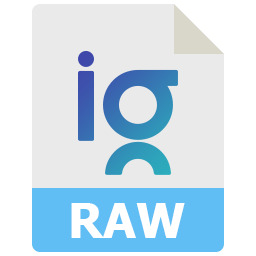
<style>
.page{position:relative;width:256px;height:256px;background:#eaeaea}
.page>*{position:absolute;margin:0}
.t1{font:48px "Tahoma-Bold";color:#ffffff}
</style>
<div class="page">
<p class="t1" style="left:71px;top:203px;width:114px;height:35px">RAW</p>
</div>
